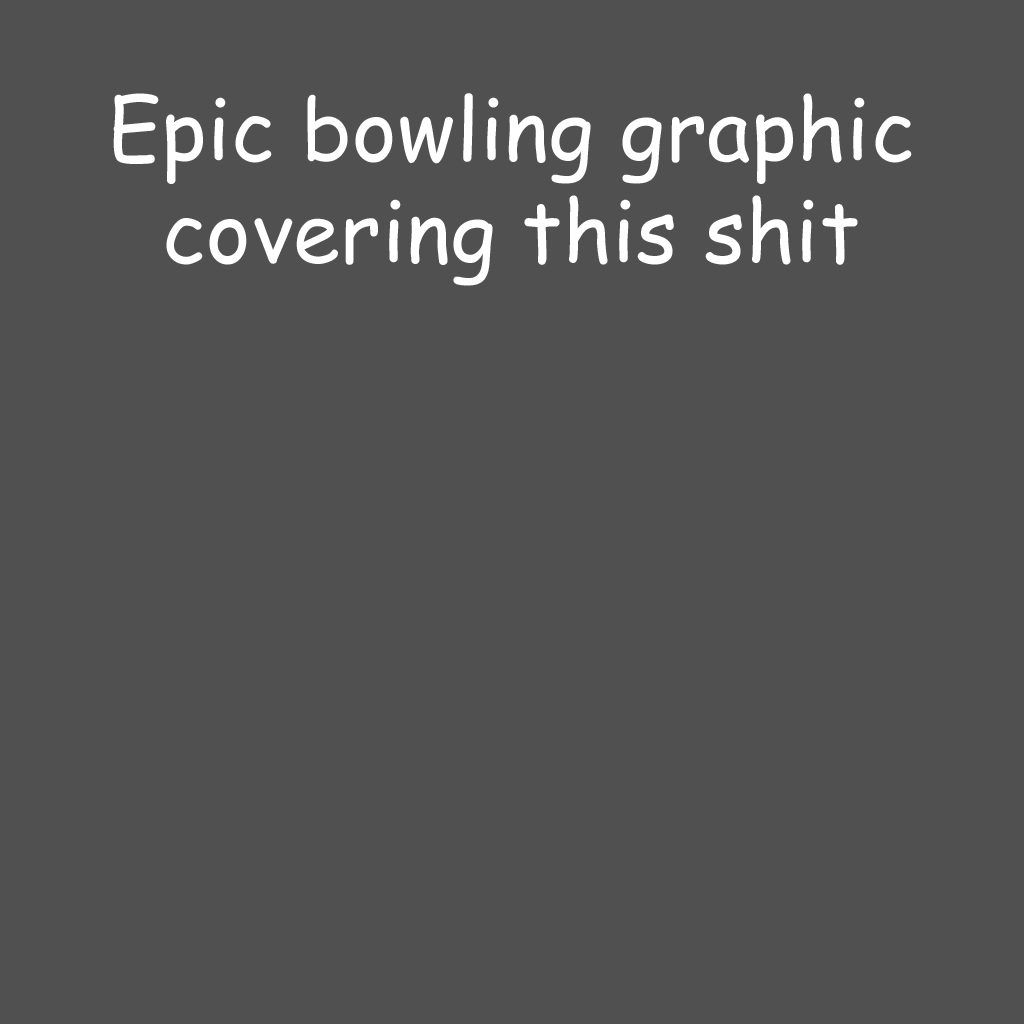
<style>
.page{position:relative;width:1024px;height:1024px;background:#505050}
.page>*{position:absolute;margin:0}
.t1{font:85px "ComicSansMS";letter-spacing:0.005em;color:#ffffff}
</style>
<div class="page">
<p class="t1" style="left:113px;top:93px;width:799px;height:193px;text-align:center">Epic bowling graphic<br>covering this shit</p>
</div>
